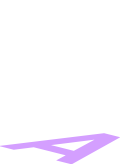
<style>
.page{position:relative;width:120px;height:164px;background:#ffffff}
.page>*{position:absolute;margin:0}
.t1{font:111.9px "Akkurat-Bold";color:#d49fff;text-transform:uppercase;scale:1.05 1}
</style>
<div class="page">
<p class="t1" style="left:0px;top:133px;width:121px;height:32px;rotate:14deg">A</p>
</div>
